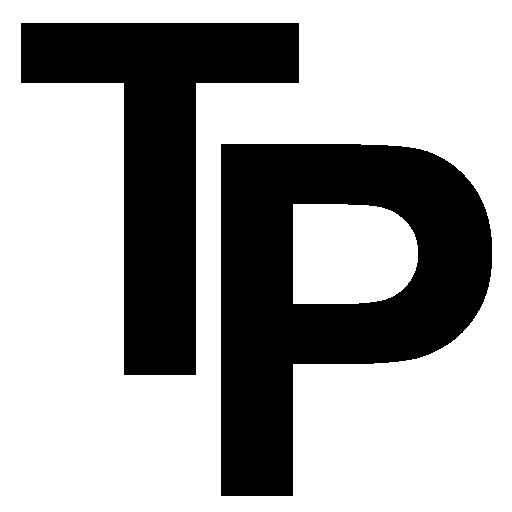
<style>
.page{position:relative;width:512px;height:512px;background:#ffffff}
.page>*{position:absolute;margin:0}
.t1{font:490.1px "Arial-BoldMT";color:#000000}
</style>
<div class="page">
<p class="t1" style="left:21px;top:23px;width:278px;height:352px">T</p>
<p class="t1" style="left:221px;top:144px;width:271px;height:352px">P</p>
</div>
